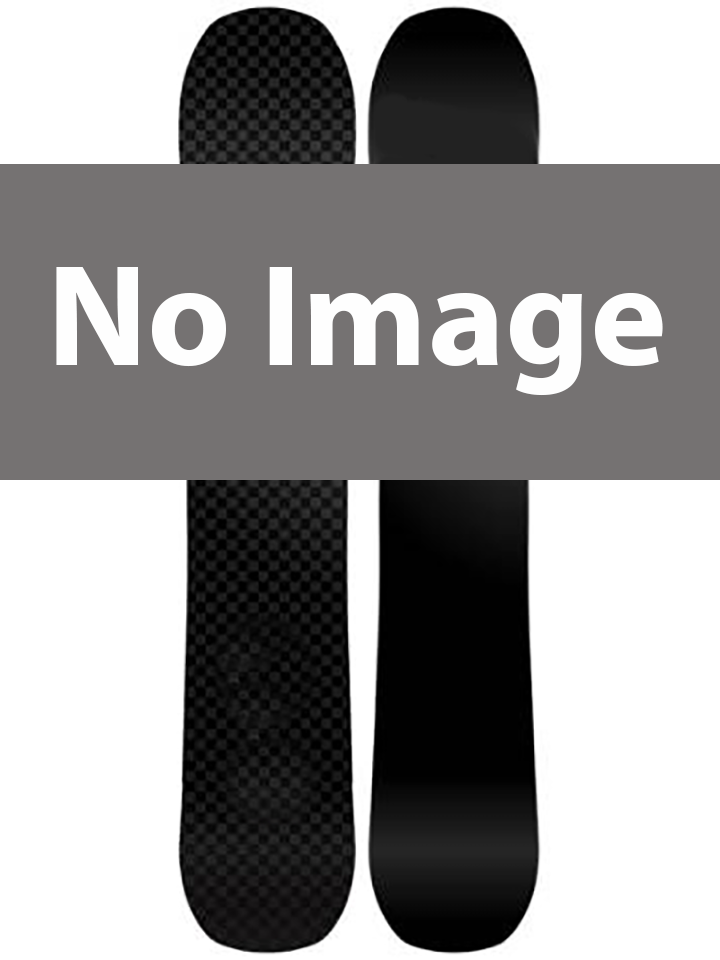
<style>
.page{position:relative;width:720px;height:960px;background:#ffffff}
.page>*{position:absolute;margin:0}
.t1{font:145.8px "MyriadPro-Bold";color:#fefefe}
</style>
<div class="page">
<p class="t1" style="left:56px;top:267px;width:607px;height:129px">No Image</p>
</div>
